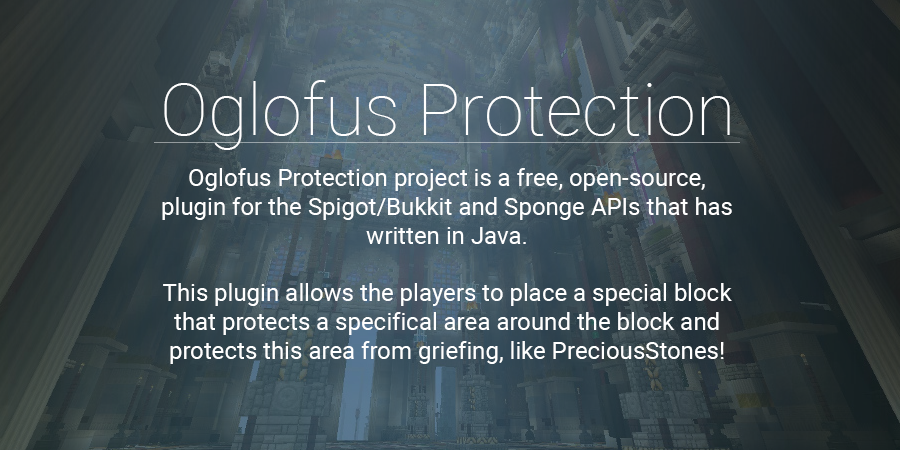
<style>
.page{position:relative;width:900px;height:450px}
.page>*{position:absolute;margin:0}
.t1{font:72px "Roboto-Thin";color:#ffffff}
.t2{font:24px "Roboto-Regular";color:#ffffff}
</style>
<div class="page">
<p class="t1" style="left:164px;top:80px;width:566px;height:70px">Oglofus Protection</p>
<p class="t2" style="left:162px;top:168px;width:570px;height:196px;text-align:center">Oglofus Protection project is a free, open-source, plugin for the Spigot/Bukkit and Sponge APIs that has written in Java. <br><br>This plugin allows the players to place a special block that protects a specifical area around the block and protects this area from griefing, like PreciousStones!</p>
</div>
